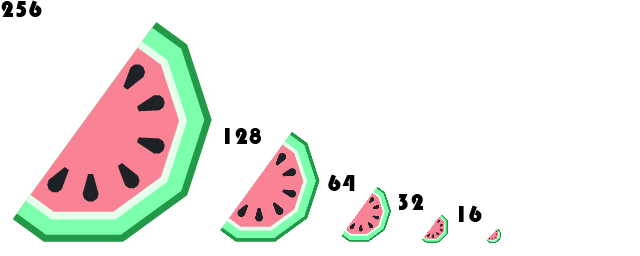
<style>
.page{position:relative;width:640px;height:256px;background:#ffffff}
.page>*{position:absolute;margin:0}
.t1{font:24px "Bauhaus93";color:#000000}
</style>
<div class="page">
<p class="t1" style="left:1px;top:0px;width:41px;height:17px">256</p>
<p class="t1" style="left:225px;top:128px;width:36px;height:16px">128</p>
<p class="t1" style="left:328px;top:174px;width:27px;height:17px">64</p>
<p class="t1" style="left:399px;top:194px;width:24px;height:16px">32</p>
<p class="t1" style="left:459px;top:205px;width:23px;height:17px">16</p>
</div>
